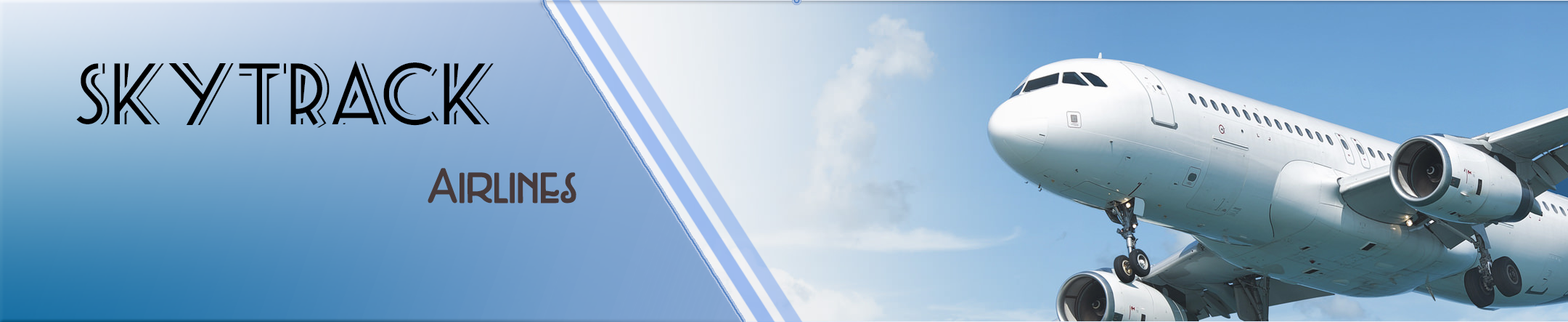
<style>
.page{position:relative;width:1568px;height:322px}
.page>*{position:absolute;margin:0}
.t1{font:70.6px "SeasideResortNF";color:#000000}
.t2{font:43.6px "DKWeltschmerz";color:#473a3a}
</style>
<div class="page">
<p class="t1" style="left:76px;top:60px;width:418px;height:68px">SkyTrack</p>
<p class="t2" style="left:428px;top:168px;width:148px;height:35px">Airlines</p>
</div>
